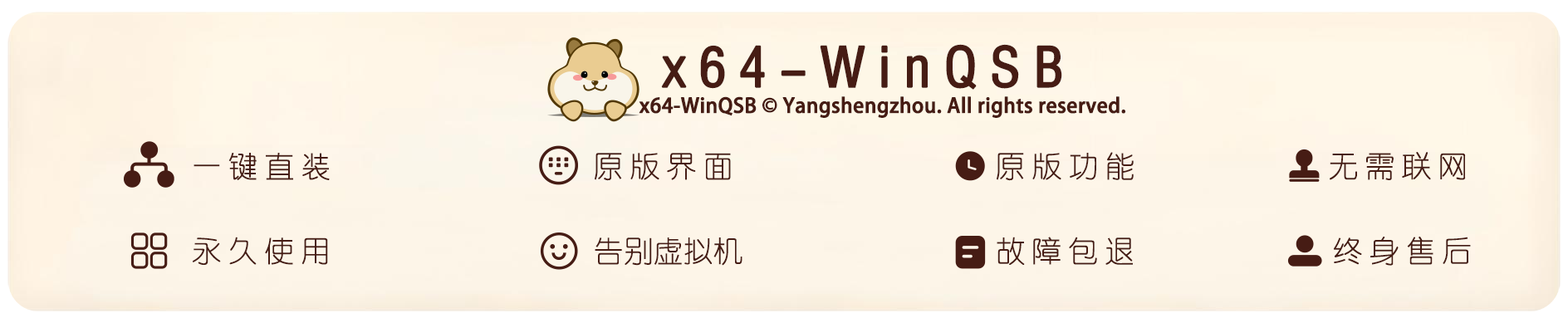
<style>
.page{position:relative;width:1568px;height:318px;background:#fdf5e8}
.page>*{position:absolute;margin:0}
.t1{font:54px "FZYTK--GBK1-0";letter-spacing:0.22em;color:#461c14;font-weight:bold}
.t2{font:19.9px "AdobeHeitiStd-Regular";color:#461c14;font-weight:bold}
.t3{font:29.9px "YouYuan";letter-spacing:0.22em;color:#461c14}
.t4{font:29.9px "YouYuan";color:#461c14}
</style>
<div class="page">
<p class="t1" style="left:661px;top:44px;width:401px;height:46px">x64-WinQSB</p>
<p class="t2" style="left:639px;top:96px;width:486px;height:22px">x64-WinQSB © Yangshengzhou. All rights reserved.</p>
<p class="t3" style="left:194px;top:153px;width:136px;height:27px">一键直装</p>
<p class="t3" style="left:595px;top:153px;width:136px;height:28px">原版界面</p>
<p class="t3" style="left:997px;top:152px;width:137px;height:29px">原版功能</p>
<p class="t3" style="left:1330px;top:152px;width:136px;height:28px">无需联网</p>
<p class="t3" style="left:193px;top:237px;width:135px;height:28px">永久使用</p>
<p class="t4" style="left:595px;top:238px;width:147px;height:28px">告别虚拟机</p>
<p class="t3" style="left:997px;top:237px;width:136px;height:28px">故障包退</p>
<p class="t3" style="left:1334px;top:237px;width:137px;height:29px">终身售后</p>
</div>
